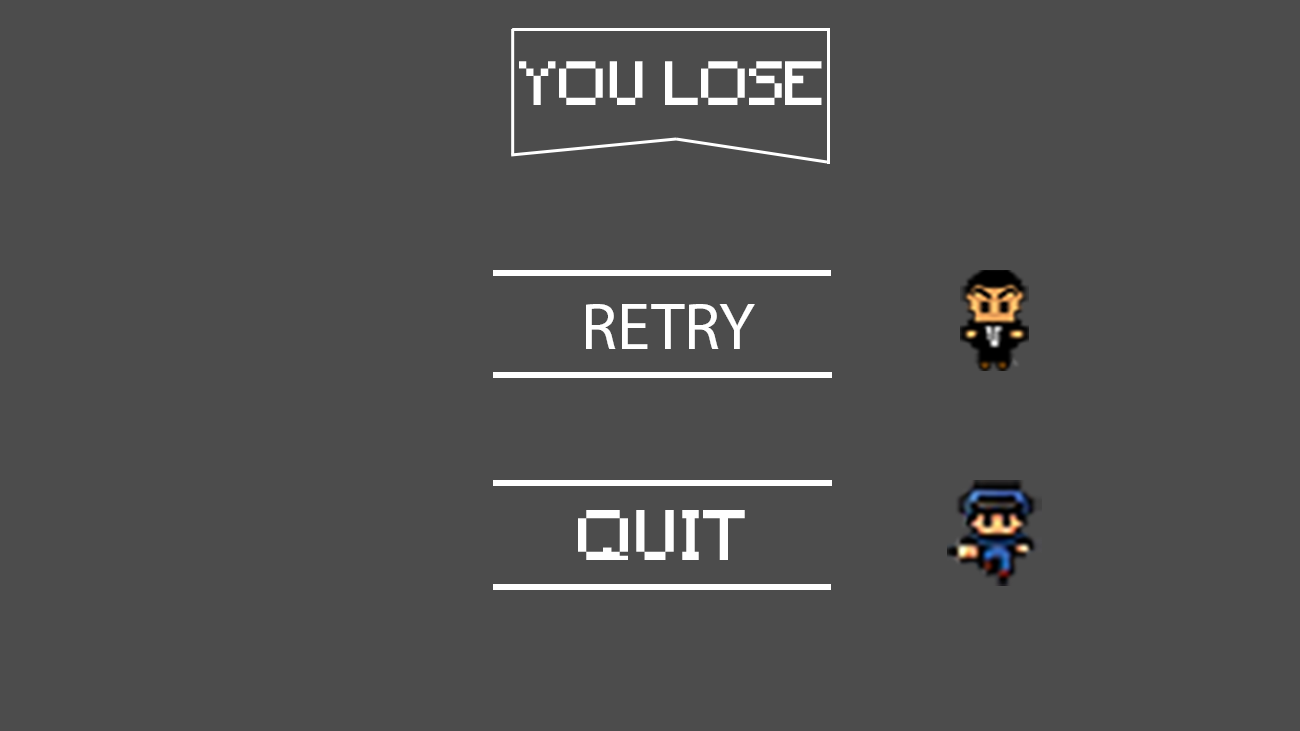
<style>
.page{position:relative;width:1300px;height:731px;background:#4c4c4c}
.page>*{position:absolute;margin:0}
.t1{font:58.3px "Minecraft";color:#ffffff}
.t2{font:66.7px "MyriadPro-Regular";color:#ffffff}
.t3{font:66.7px "Minecraft";color:#ffffff}
</style>
<div class="page">
<p class="t1" style="left:519px;top:61px;width:303px;height:44px">YOU LOSE</p>
<p class="t2" style="left:586px;top:304px;width:169px;height:45px">RETRY</p>
<p class="t3" style="left:578px;top:510px;width:167px;height:50px">QUIT</p>
</div>
